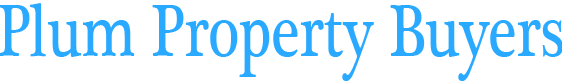
<style>
.page{position:relative;width:562px;height:82px;background:#ffffff}
.page>*{position:absolute;margin:0}
.t1{font:76px "PlantagenetCherokee";color:#29a9ff;scale:0.78 1}
</style>
<div class="page">
<p class="t1" style="left:0px;top:3px;width:563px;height:78px">Plum Property Buyers</p>
</div>
